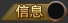
<style>
.page{position:relative;width:68px;height:23px;background:#333333}
.page>*{position:absolute;margin:0}
.t1{font:14px "SimHei"}
</style>
<div class="page">
<p class="t1" style="left:15px;top:4px;width:28px;height:14px">信息</p>
</div>
